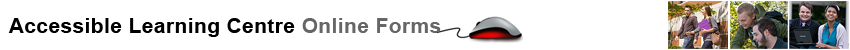
<style>
.page{position:relative;width:850px;height:50px;background:#ffffff}
.page>*{position:absolute;margin:0}
.t1{font:20.7px "Arial-BoldMT";letter-spacing:0.025em;color:#000000}
.t2{font:20.7px "Arial-BoldMT";letter-spacing:0.025em;color:#666666}
</style>
<div class="page">
<p class="t1" style="left:8px;top:18px;width:433px;height:19px">Accessible Learning Centre <span class="t2">Online Forms</span></p>
</div>
